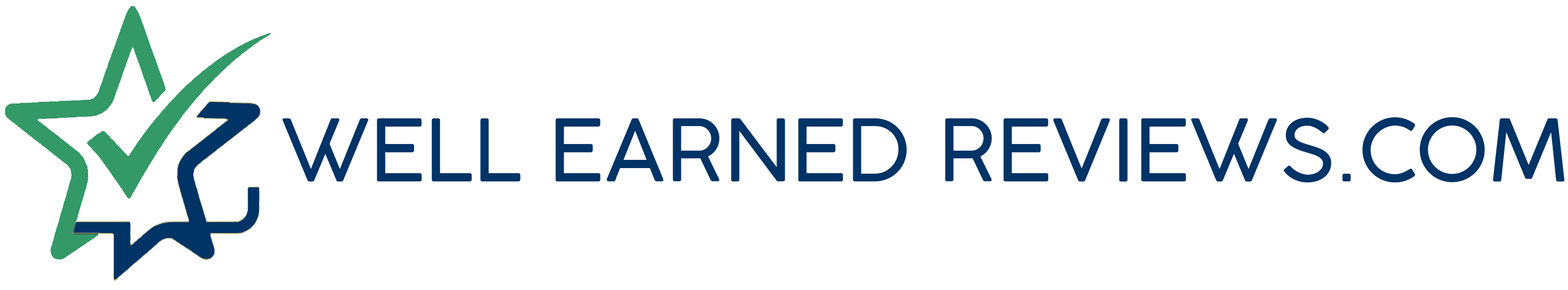
<style>
.page{position:relative;width:1568px;height:290px;background:#ffffff}
.page>*{position:absolute;margin:0}
.t1{font:84.9px "Cocogoose-Light";color:#003366}
</style>
<div class="page">
<p class="t1" style="left:282px;top:117px;width:1282px;height:65px">WELL EARNED REVIEWS.COM</p>
</div>
